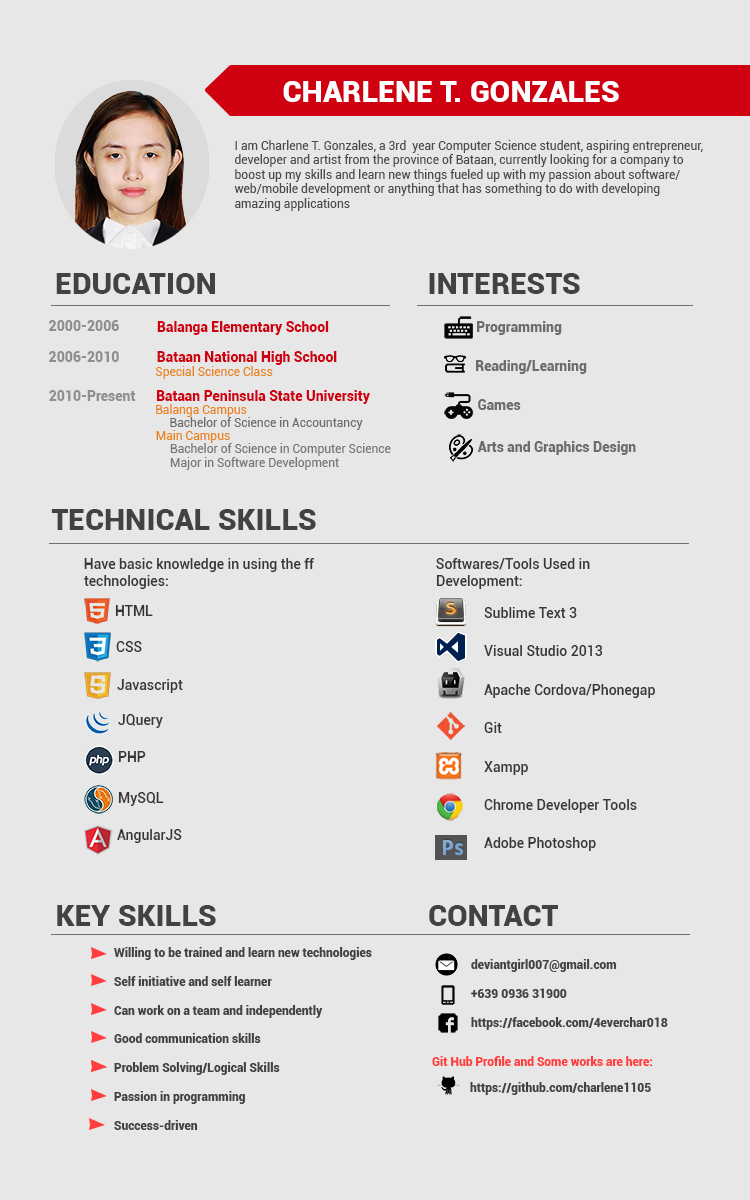
<style>
.page{position:relative;width:750px;height:1200px;background:#e7e7e7}
.page>*{position:absolute;margin:0}
.t1{font:30px "Roboto-Black";color:#ffffff}
.t2{font:12px "Roboto-Regular";color:#4b4b4b}
.t3{font:30px "Roboto-Black";color:#424242}
.t4{font:14px "Roboto-Black";color:#8f8f8f}
.t5{font:14px "Roboto-Black";color:#cf000f}
.t6{font:14px "Roboto-Black";color:#6c6c6c}
.t7{font:12px "Roboto-Regular";color:#eb8314}
.t8{font:12px "Roboto-Regular";color:#6c6c6c}
.t9{font:12px "Roboto-Regular";color:#767676}
.t10{font:14px "Roboto-Medium";color:#363636}
.t11{font:12px "Roboto-Black";color:#424242}
.t12{font:12px "Roboto-Black";color:#ff3d3d}
</style>
<div class="page">
<p class="t1" style="left:283px;top:81px;width:336px;height:21px">CHARLENE T. GONZALES</p>
<p class="t2" style="left:234px;top:140px;width:469px;height:71px">I am Charlene T. Gonzales, a 3rd  year Computer Science student, aspiring entrepreneur, <br>developer and artist from the province of Bataan, currently looking for a company to <br>boost up my skills and learn new things fueled up with my passion about software/<br>web/mobile development or anything that has something to do with developing<br>amazing applications</p>
<p class="t3" style="left:56px;top:273px;width:159px;height:21px">EDUCATION</p>
<p class="t3" style="left:429px;top:273px;width:151px;height:21px">INTERESTS</p>
<p class="t4" style="left:49px;top:320px;width:70px;height:11px">2000-2006</p>
<p class="t5" style="left:157px;top:321px;width:172px;height:14px">Balanga Elementary School</p>
<p class="t6" style="left:477px;top:321px;width:85px;height:14px">Programming</p>
<p class="t4" style="left:49px;top:351px;width:70px;height:11px">2006-2010</p>
<p class="t5" style="left:157px;top:351px;width:180px;height:14px">Bataan National High School</p>
<p class="t7" style="left:155px;top:366px;width:118px;height:13px">Special Science Class</p>
<p class="t6" style="left:476px;top:360px;width:111px;height:14px">Reading/Learning</p>
<p class="t4" style="left:49px;top:390px;width:87px;height:11px">2010-Present</p>
<p class="t5" style="left:157px;top:390px;width:213px;height:14px">Bataan Peninsula State University</p>
<p class="t6" style="left:478px;top:399px;width:43px;height:11px">Games</p>
<p class="t7" style="left:156px;top:404px;width:91px;height:13px">Balanga Campus</p>
<p class="t8" style="left:170px;top:417px;width:193px;height:13px">Bachelor of Science in Accountancy</p>
<p class="t7" style="left:156px;top:430px;width:74px;height:13px">Main Campus</p>
<p class="t9" style="left:170px;top:443px;width:221px;height:27px">Bachelor of Science in Computer Science <br>Major in Software Development</p>
<p class="t6" style="left:477px;top:441px;width:159px;height:14px">Arts and Graphics Design</p>
<p class="t3" style="left:51px;top:509px;width:265px;height:21px">TECHNICAL SKILLS</p>
<p class="t10" style="left:84px;top:558px;width:230px;height:31px">Have basic knowledge in using the ff<br>technologies:</p>
<p class="t10" style="left:436px;top:558px;width:154px;height:31px">Softwares/Tools Used in <br>Development:</p>
<p class="t10" style="left:115px;top:605px;width:38px;height:11px">HTML</p>
<p class="t10" style="left:484px;top:607px;width:171px;height:244px">Sublime Text 3<br><br>Visual Studio 2013<br><br>Apache Cordova/Phonegap<br><br>Git<br><br>Xampp<br><br>Chrome Developer Tools<br><br>Adobe Photoshop</p>
<p class="t10" style="left:116px;top:641px;width:26px;height:11px">CSS</p>
<p class="t10" style="left:117px;top:679px;width:66px;height:14px">Javascript</p>
<p class="t10" style="left:118px;top:714px;width:45px;height:14px">JQuery</p>
<p class="t10" style="left:118px;top:751px;width:28px;height:11px">PHP</p>
<p class="t10" style="left:118px;top:792px;width:46px;height:14px">MySQL</p>
<p class="t10" style="left:117px;top:829px;width:65px;height:14px">AngularJS</p>
<p class="t3" style="left:57px;top:905px;width:159px;height:21px">KEY SKILLS</p>
<p class="t3" style="left:429px;top:905px;width:129px;height:21px">CONTACT</p>
<p class="t11" style="left:114px;top:947px;width:258px;height:183px">Willing to be trained and learn new technologies<br><br>Self initiative and self learner<br><br>Can work on a team and independently<br><br>Good communication skills<br><br>Problem Solving/Logical Skills<br><br>Passion in programming<br><br>Success-driven</p>
<p class="t11" style="left:471px;top:959px;width:197px;height:71px">deviantgirl007@gmail.com<br><br>+639 0936 31900<br><br>https://facebook.com/4everchar018</p>
<p class="t12" style="left:432px;top:1056px;width:221px;height:10px">Git Hub Profile and Some works are here:</p>
<p class="t11" style="left:470px;top:1082px;width:181px;height:13px">https://github.com/charlene1105</p>
</div>
